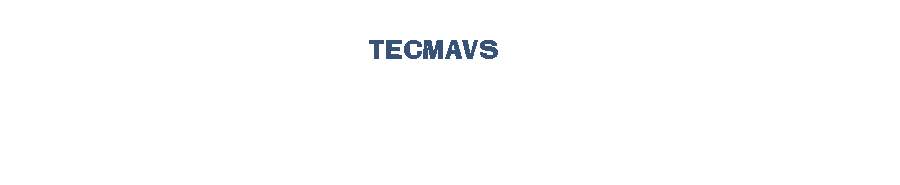
<style>
.page{position:relative;width:900px;height:185px;background:#ffffff}
.page>*{position:absolute;margin:0}
.t1{font:25px "AlorNormal";color:#395277;text-transform:uppercase}
</style>
<div class="page">
<p class="t1" style="left:369px;top:40px;width:129px;height:19px">TECMAVS</p>
</div>
